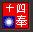
<style>
.page{position:relative;width:33px;height:32px;background:#f20000}
.page>*{position:absolute;margin:0}
.t1{font:10.4px "SimSun";color:#ffffff}
.t2{font:11.7px "SimSun";color:#ffffff}
</style>
<div class="page">
<p class="t1" style="left:6px;top:4px;width:19px;height:9px">十四</p>
<p class="t2" style="left:16px;top:15px;width:11px;height:12px">奉</p>
</div>
